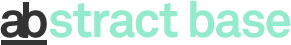
<style>
.page{position:relative;width:291px;height:45px;background:#ffffff}
.page>*{position:absolute;margin:0}
.t1{font:50px "Akkurat-Bold";letter-spacing:-0.03em;color:#93ebcb}
</style>
<div class="page">
<p class="t1" style="left:49px;top:0px;width:242px;height:38px">stract base</p>
</div>
